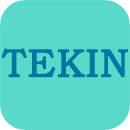
<style>
.page{position:relative;width:130px;height:130px;background:#59d9c9}
.page>*{position:absolute;margin:0}
.t1{font:39px "STZhongsong";color:#0076a0;font-weight:bold}
</style>
<div class="page">
<p class="t1" style="left:1px;top:48px;width:127px;height:30px">TEKIN</p>
</div>
